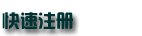
<style>
.page{position:relative;width:142px;height:36px;background:#ffffff}
.page>*{position:absolute;margin:0}
.t1{font:18px "hzgb";color:#003333}
</style>
<div class="page">
<p class="t1" style="left:2px;top:12px;width:71px;height:17px">快速注册</p>
</div>
